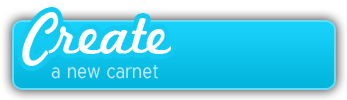
<style>
.page{position:relative;width:347px;height:100px}
.page>*{position:absolute;margin:0}
.t1{font:58.4px "MarketingScript";color:#ffffff}
.t2{font:20px "Tuffy";color:#c0e7ef}
</style>
<div class="page">
<p class="t1" style="left:22px;top:12px;width:149px;height:54px">Create</p>
<p class="t2" style="left:51px;top:65px;width:107px;height:14px">a new carnet</p>
</div>
